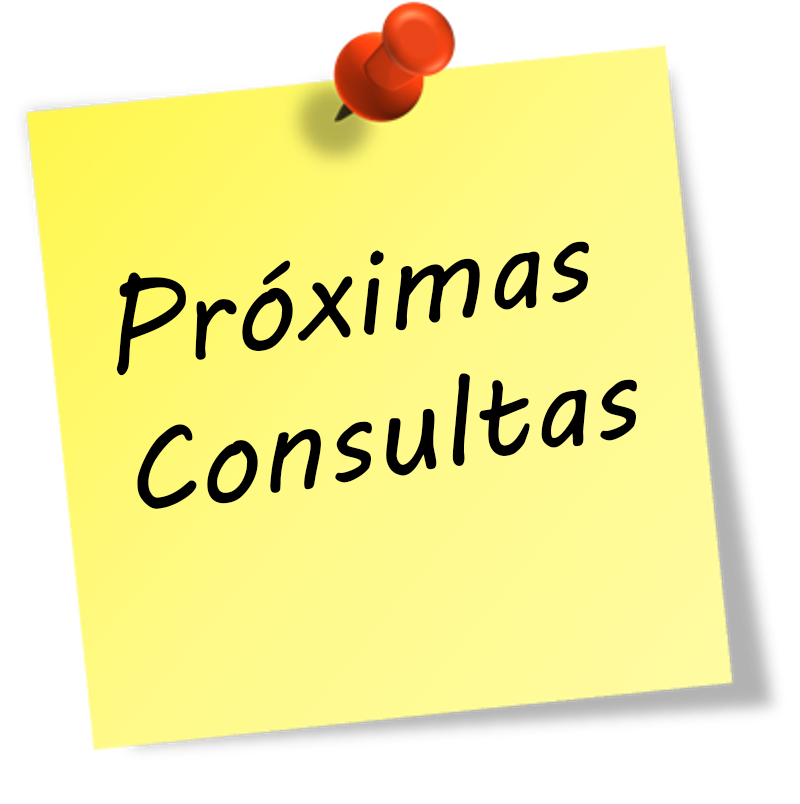
<style>
.page{position:relative;width:800px;height:804px;background:#ffffff}
.page>*{position:absolute;margin:0}
.t1{font:120px "MVBoli";color:#000000}
</style>
<div class="page">
<p class="t1" style="left:116px;top:241px;width:521px;height:268px;rotate:-9deg">Próximas<br>Consultas</p>
</div>
